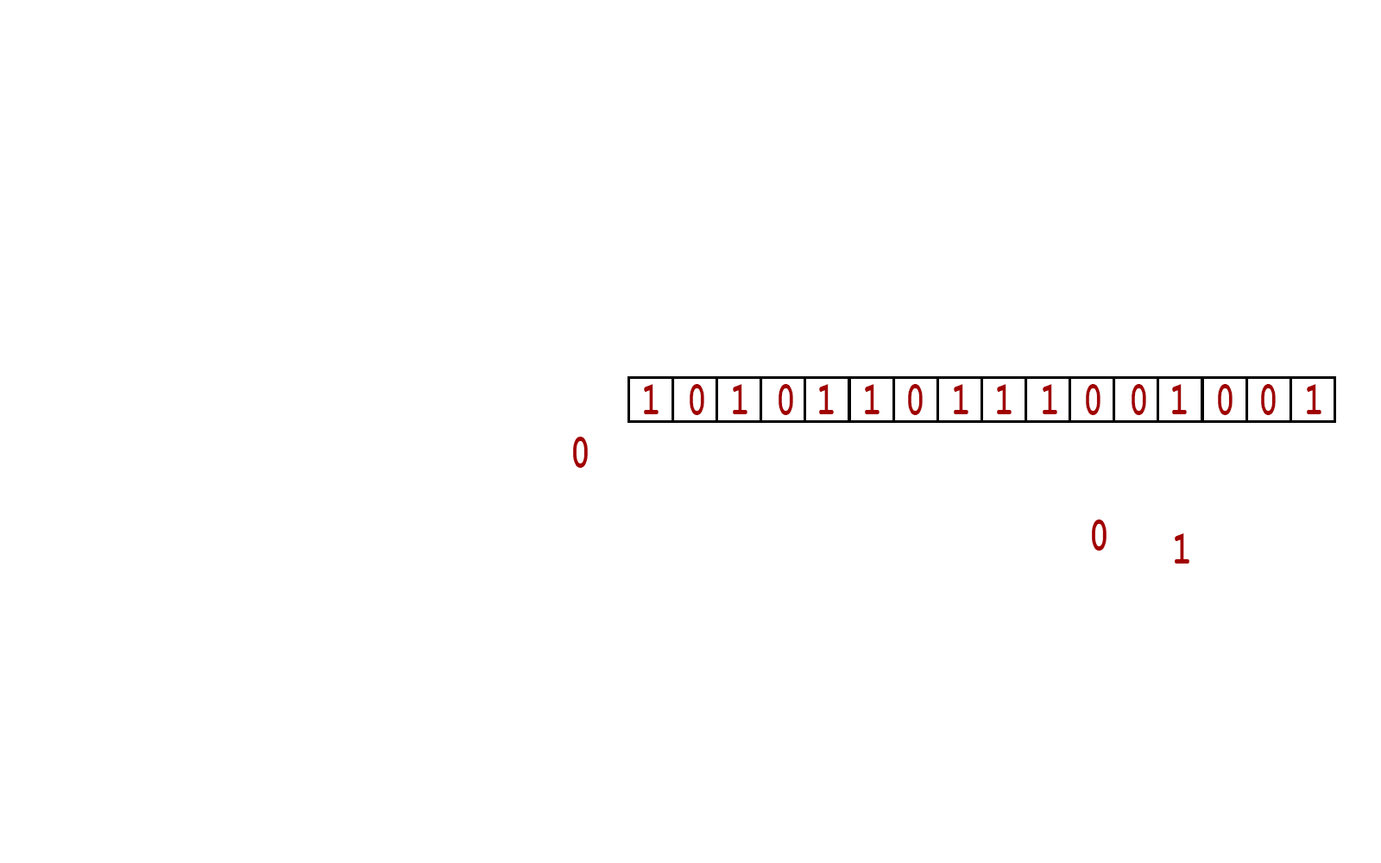
<style>
.page{position:relative;width:1381px;height:863px;background:#ffffff}
.page>*{position:absolute;margin:0}
.t1{font:47.1px "CourierNewPS-BoldMT";letter-spacing:0.05em;color:#a10000;scale:0.69 1}
</style>
<div class="page">
<p class="t1" style="left:644px;top:384px;width:15px;height:30px">1</p>
<p class="t1" style="left:690px;top:384px;width:14px;height:31px">0</p>
<p class="t1" style="left:733px;top:384px;width:15px;height:30px">1</p>
<p class="t1" style="left:779px;top:384px;width:14px;height:31px">0</p>
<p class="t1" style="left:819px;top:384px;width:15px;height:30px">1</p>
<p class="t1" style="left:865px;top:384px;width:15px;height:30px">1</p>
<p class="t1" style="left:908px;top:384px;width:15px;height:31px">0</p>
<p class="t1" style="left:954px;top:384px;width:15px;height:30px">1</p>
<p class="t1" style="left:997px;top:384px;width:15px;height:30px">1</p>
<p class="t1" style="left:1043px;top:384px;width:15px;height:30px">1</p>
<p class="t1" style="left:1086px;top:384px;width:15px;height:31px">0</p>
<p class="t1" style="left:1132px;top:384px;width:14px;height:31px">0</p>
<p class="t1" style="left:1172px;top:384px;width:15px;height:30px">1</p>
<p class="t1" style="left:1218px;top:384px;width:15px;height:31px">0</p>
<p class="t1" style="left:1261px;top:384px;width:15px;height:31px">0</p>
<p class="t1" style="left:1307px;top:384px;width:15px;height:30px">1</p>
<p class="t1" style="left:573px;top:437px;width:15px;height:31px">0</p>
<p class="t1" style="left:1092px;top:520px;width:15px;height:31px">0</p>
<p class="t1" style="left:1175px;top:534px;width:15px;height:30px">1</p>
</div>
